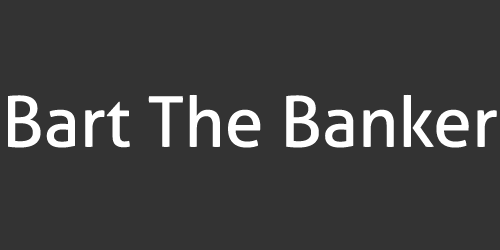
<style>
.page{position:relative;width:500px;height:250px;background:#333333}
.page>*{position:absolute;margin:0}
.t1{font:70px "Aller";color:#ffffff}
</style>
<div class="page">
<p class="t1" style="left:8px;top:94px;width:489px;height:54px">Bart The Banker</p>
</div>
